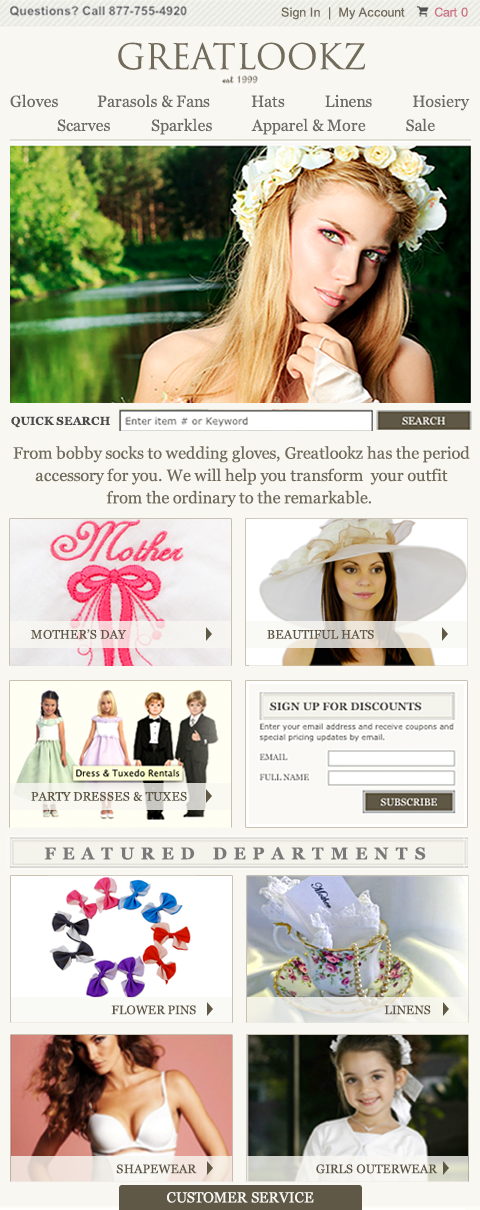
<style>
.page{position:relative;width:480px;height:1210px;background:#f8f7f2}
.page>*{position:absolute;margin:0}
.t1{font:12.6px "ArialMT";letter-spacing:-0.005em;color:#726a5a}
.t2{font:12.6px "ArialMT";letter-spacing:-0.005em;color:#cc7485}
.t3{font:34.5px "TrajanPro-Regular";letter-spacing:-0.005em;color:#726a5a}
.t4{font:16px "Georgia";letter-spacing:-0.005em;color:#6b6d65}
.t5{font:11.3px "Georgia-Bold";letter-spacing:0.015em;color:#4c4a4a}
.t6{font:16.5px/22.3px "Georgia";letter-spacing:-0.005em;color:#726a5a}
.t7{font:12.3px "Georgia";letter-spacing:0.015em;color:#5f5745}
.t8{font:16.9px "Georgia-Bold";letter-spacing:0.415em;color:#797979}
.t9{font:14.6px "Georgia";letter-spacing:-0.005em;color:#f8f7f2}
</style>
<div class="page">
<p class="t1" style="left:281px;top:7px;width:124px;height:13px">Sign In  |  My Account</p>
<p class="t2" style="left:434px;top:7px;width:34px;height:10px">Cart 0</p>
<p class="t3" style="left:118px;top:42px;width:247px;height:28px">GREATLOOKZ</p>
<p class="t4" style="left:10px;top:94px;width:48px;height:14px">Gloves</p>
<p class="t4" style="left:97px;top:94px;width:113px;height:14px">Parasols &amp; Fans</p>
<p class="t4" style="left:251px;top:95px;width:34px;height:13px">Hats</p>
<p class="t4" style="left:325px;top:94px;width:47px;height:14px">Linens</p>
<p class="t4" style="left:413px;top:94px;width:57px;height:17px">Hosiery</p>
<p class="t4" style="left:57px;top:119px;width:53px;height:13px">Scarves</p>
<p class="t4" style="left:151px;top:118px;width:61px;height:17px">Sparkles</p>
<p class="t4" style="left:251px;top:118px;width:115px;height:17px">Apparel &amp; More</p>
<p class="t4" style="left:406px;top:118px;width:29px;height:14px">Sale</p>
<p class="t5" style="left:11px;top:416px;width:99px;height:12px">QUICK SEARCH</p>
<p class="t6" style="left:13px;top:446px;width:457px;height:61px;text-align:center">From bobby socks to wedding gloves, Greatlookz has the period<br> accessory for you. We will help you transform  your outfit <br>from the ordinary to the remarkable.</p>
<p class="t7" style="left:31px;top:629px;width:95px;height:10px">MOTHER’S DAY</p>
<p class="t7" style="left:267px;top:629px;width:107px;height:10px">BEAUTIFUL HATS</p>
<p class="t7" style="left:31px;top:791px;width:156px;height:10px">PARTY DRESSES &amp; TUXES</p>
<p class="t8" style="left:44px;top:847px;width:382px;height:13px">FEATURED DEPARTMENTS</p>
<p class="t7" style="left:111px;top:1005px;width:85px;height:10px">FLOWER PINS</p>
<p class="t7" style="left:384px;top:1005px;width:47px;height:10px">LINENS</p>
<p class="t7" style="left:116px;top:1164px;width:81px;height:10px">SHAPEWEAR</p>
<p class="t7" style="left:316px;top:1164px;width:122px;height:10px">GIRLS OUTERWEAR</p>
<p class="t9" style="left:167px;top:1192px;width:147px;height:11px">CUSTOMER SERVICE</p>
</div>
